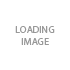
<style>
.page{position:relative;width:70px;height:70px;background:#ffffff}
.page>*{position:absolute;margin:0}
.t1{font:10px "MyriadPro-Regular";color:#999999}
</style>
<div class="page">
<p class="t1" style="left:15px;top:26px;width:40px;height:19px;text-align:center">LOADING<br>IMAGE</p>
</div>
